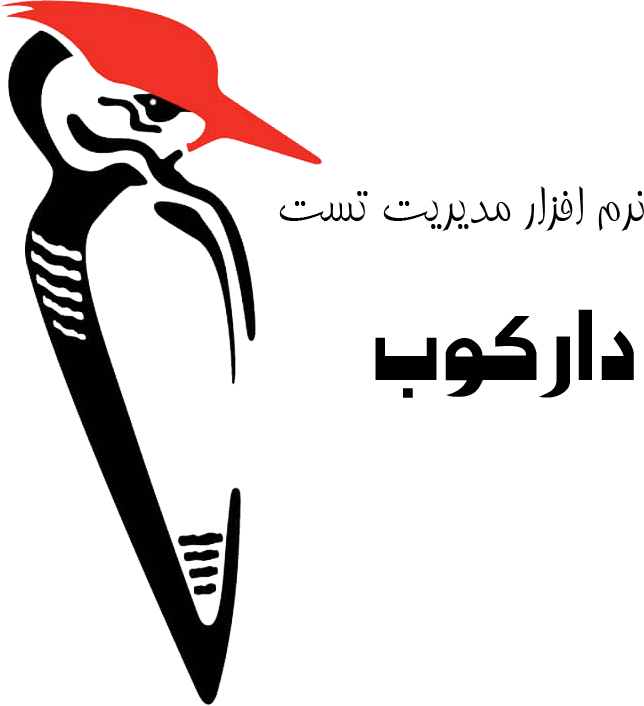
<style>
.page{position:relative;width:644px;height:706px;background:#ffffff}
.page>*{position:absolute;margin:0}
.t1{font:60px "BTabassom";color:#000000}
.t2{font:100px "Mj_Alphabet";color:#000000}
</style>
<div class="page">
<p class="t1" style="left:279px;top:186px;width:365px;height:45px">نرم افزار مدیریت تست</p>
<p class="t2" style="left:375px;top:309px;width:259px;height:89px">دارکوب</p>
</div>
